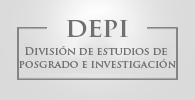
<style>
.page{position:relative;width:195px;height:100px}
.page>*{position:absolute;margin:0}
.t1{font:26.6px "TrajanPro-Bold";color:#707070}
.t2{font:10.6px "TrajanPro-Bold";color:#707070}
</style>
<div class="page">
<p class="t1" style="left:66px;top:20px;width:62px;height:17px">depi</p>
<p class="t2" style="left:19px;top:46px;width:157px;height:22px;text-align:center">División de estudios de <br>posgrado e investigación</p>
</div>
